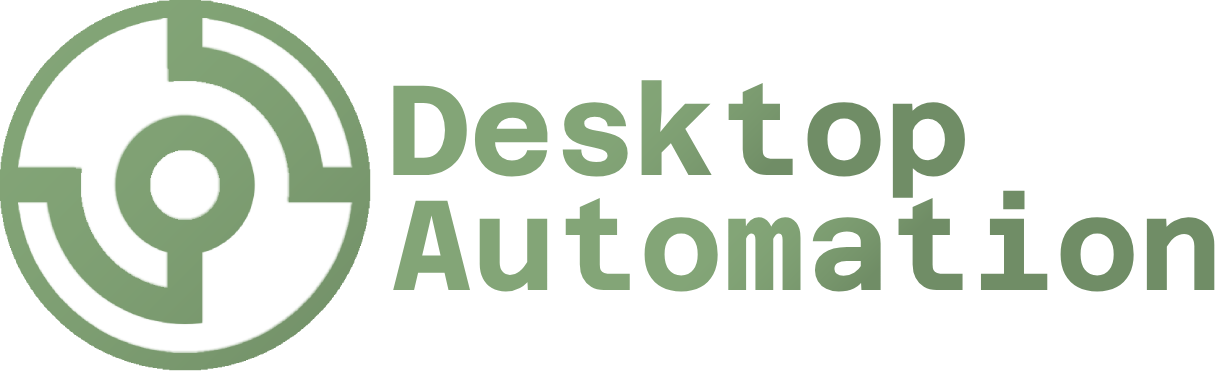
<style>
.page{position:relative;width:1224px;height:374px;background:#ffffff}
.page>*{position:absolute;margin:0}
.t1{font:128px "AzeretMono-Bold";color:#80a174}
.t2{font:128px "AzeretMono-Bold";color:#7e9f73}
</style>
<div class="page">
<p class="t1" style="left:393px;top:80px;width:572px;height:118px">Desktop</p>
<p class="t2" style="left:393px;top:190px;width:822px;height:102px">Automation</p>
</div>
